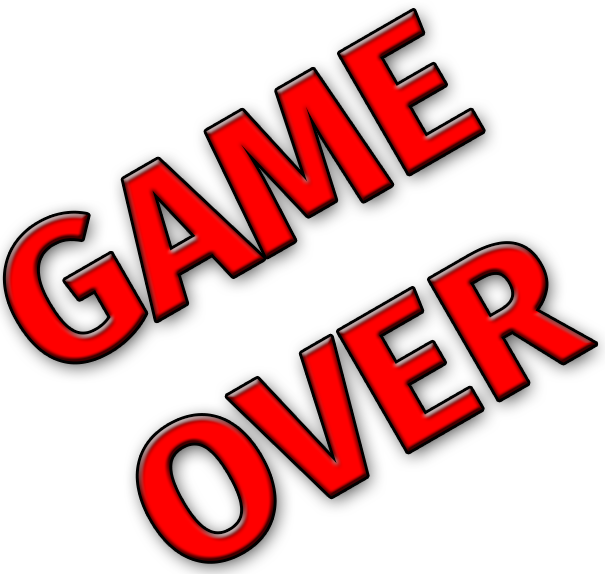
<style>
.page{position:relative;width:605px;height:574px;background:#ffffff}
.page>*{position:absolute;margin:0}
.t1{font:200px "FiraSans-Bold";color:#ff0000}
</style>
<div class="page">
<p class="t1" style="left:5px;top:10px;width:591px;height:551px;text-align:center;rotate:-30deg">GAME<br>OVER</p>
</div>
